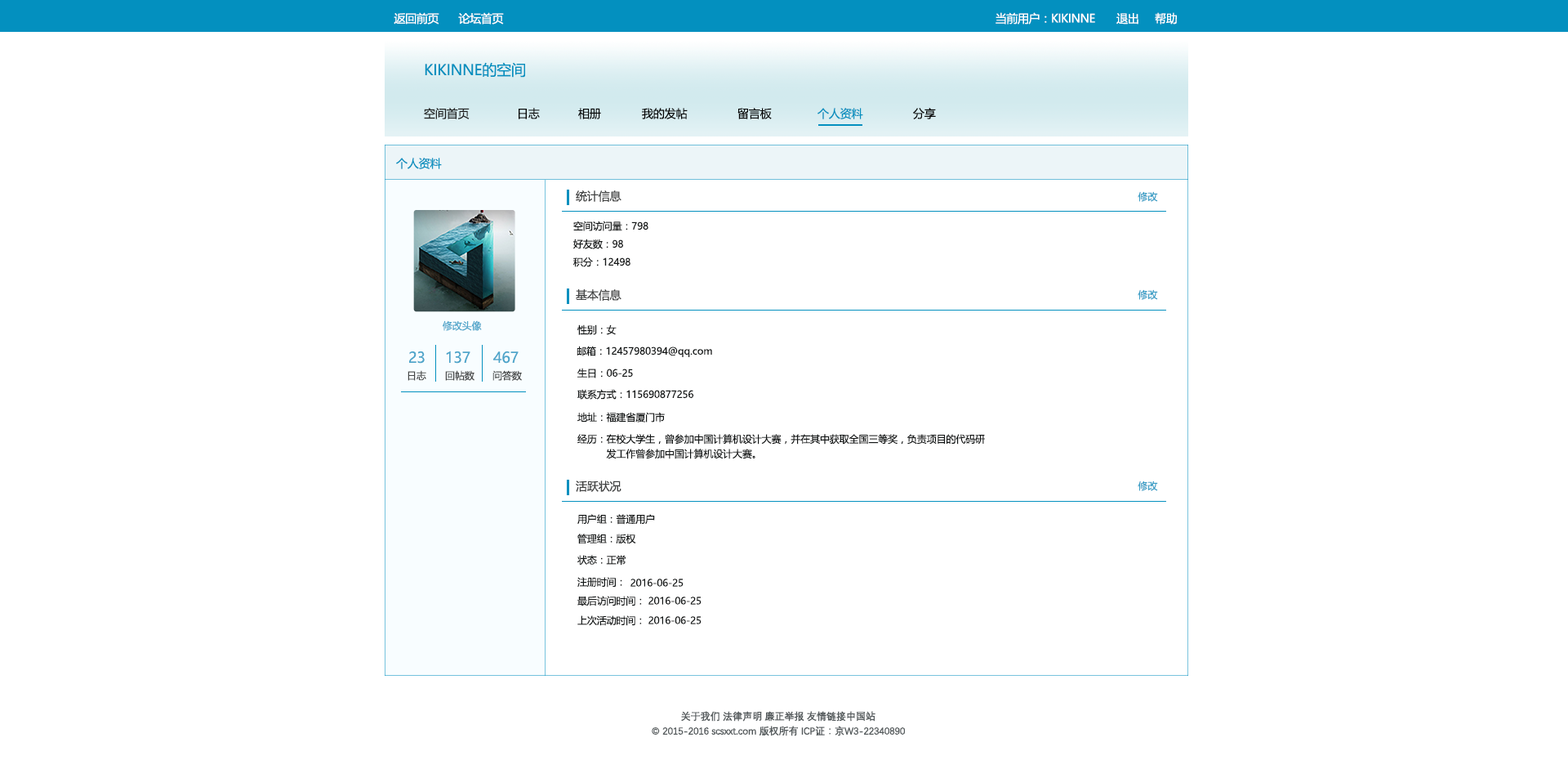
<style>
.page{position:relative;width:1568px;height:760px;background:#ffffff}
.page>*{position:absolute;margin:0}
.t1{font:11.4px "MicrosoftYaHei";letter-spacing:-0.025em;color:#ffffff}
.t2{font:14.7px "MicrosoftYaHei";letter-spacing:-0.01em;color:#0390bf}
.t3{font:11.4px "MicrosoftYaHei";letter-spacing:-0.01em;color:#212222}
.t4{font:11.4px "MicrosoftYaHei";letter-spacing:-0.01em;color:#040404}
.t5{font:11.4px "MicrosoftYaHei";letter-spacing:-0.01em;color:#0390bf}
.t6{font:11.4px "MicrosoftYaHei";letter-spacing:-0.01em;color:#404141}
.t7{font:9.8px "MicrosoftYaHei";letter-spacing:-0.01em;color:#3a9ec6}
.t8{font:9.8px "MicrosoftYaHei";letter-spacing:-0.01em;color:#131616}
.t9{font:9.8px "MicrosoftYaHei";letter-spacing:-0.01em;color:#4ea5ca}
.t10{font:14.7px "MicrosoftYaHei";letter-spacing:-0.01em;color:#4ea5ca}
.t11{font:9.8px "MicrosoftYaHei";letter-spacing:-0.01em;color:#454646}
.t12{font:9.8px/14.7px "MicrosoftYaHei";letter-spacing:-0.01em;color:#131616}
.t13{font:9.8px/14.7px "DengXian-Regular";letter-spacing:-0.025em;color:#545a5c;font-weight:bold}
</style>
<div class="page">
<p class="t1" style="left:394px;top:12px;width:45px;height:12px">返回前页</p>
<p class="t1" style="left:458px;top:12px;width:46px;height:12px">论坛首页</p>
<p class="t1" style="left:996px;top:12px;width:99px;height:12px">当前用户：KIKINNE</p>
<p class="t1" style="left:1116px;top:13px;width:22px;height:11px">退出</p>
<p class="t1" style="left:1155px;top:12px;width:22px;height:12px">帮助</p>
<p class="t2" style="left:425px;top:62px;width:100px;height:16px">KIKINNE的空间</p>
<p class="t3" style="left:424px;top:108px;width:46px;height:11px">空间首页</p>
<p class="t4" style="left:519px;top:108px;width:21px;height:11px">日志</p>
<p class="t4" style="left:578px;top:108px;width:23px;height:11px">相册</p>
<p class="t4" style="left:642px;top:108px;width:46px;height:11px">我的发帖</p>
<p class="t4" style="left:737px;top:108px;width:35px;height:11px">留言板</p>
<p class="t5" style="left:817px;top:108px;width:46px;height:11px">个人资料</p>
<p class="t4" style="left:913px;top:108px;width:23px;height:11px">分享</p>
<p class="t5" style="left:396px;top:158px;width:46px;height:11px">个人资料</p>
<p class="t6" style="left:576px;top:190px;width:45px;height:12px">统计信息</p>
<p class="t7" style="left:1138px;top:191px;width:20px;height:11px">修改</p>
<p class="t8" style="left:573px;top:220px;width:75px;height:11px">空间访问量：798</p>
<p class="t8" style="left:573px;top:238px;width:50px;height:11px">好友数：98</p>
<p class="t8" style="left:573px;top:256px;width:57px;height:11px">积分：12498</p>
<p class="t6" style="left:576px;top:289px;width:45px;height:12px">基本信息</p>
<p class="t7" style="left:1138px;top:289px;width:20px;height:11px">修改</p>
<p class="t9" style="left:443px;top:320px;width:39px;height:11px">修改头像</p>
<p class="t8" style="left:577px;top:324px;width:40px;height:11px">性别：女</p>
<p class="t10" style="left:409px;top:351px;width:16px;height:12px">23</p>
<p class="t10" style="left:446px;top:350px;width:24px;height:13px">137</p>
<p class="t10" style="left:493px;top:351px;width:26px;height:12px">467</p>
<p class="t8" style="left:577px;top:345px;width:135px;height:12px">邮箱：12457980394@qq.com</p>
<p class="t11" style="left:408px;top:370px;width:18px;height:11px">日志</p>
<p class="t11" style="left:445px;top:370px;width:29px;height:11px">回帖数</p>
<p class="t11" style="left:492px;top:370px;width:30px;height:11px">问答数</p>
<p class="t8" style="left:577px;top:368px;width:56px;height:10px">生日：06-25</p>
<p class="t8" style="left:577px;top:389px;width:117px;height:10px">联系方式：115690877256</p>
<p class="t8" style="left:577px;top:412px;width:88px;height:10px">地址：福建省厦门市</p>
<p class="t12" style="left:577px;top:434px;width:408px;height:25px">经历：在校大学生，曾参加中国计算机设计大赛，并在其中获取全国三等奖，负责项目的代码研　　　发工作曾参加中国计算机设计大赛。</p>
<p class="t6" style="left:576px;top:480px;width:45px;height:12px">活跃状况</p>
<p class="t7" style="left:1138px;top:480px;width:20px;height:11px">修改</p>
<p class="t8" style="left:577px;top:514px;width:78px;height:10px">用户组：普通用户</p>
<p class="t8" style="left:577px;top:533px;width:59px;height:11px">管理组：版权</p>
<p class="t8" style="left:577px;top:555px;width:49px;height:10px">状态：正常</p>
<p class="t8" style="left:577px;top:577px;width:45px;height:10px">注册时间：</p>
<p class="t8" style="left:630px;top:578px;width:54px;height:8px">2016-06-25</p>
<p class="t8" style="left:577px;top:595px;width:65px;height:11px">最后访问时间：</p>
<p class="t8" style="left:648px;top:596px;width:54px;height:8px">2016-06-25</p>
<p class="t8" style="left:577px;top:615px;width:65px;height:11px">上次活动时间：</p>
<p class="t8" style="left:648px;top:616px;width:54px;height:8px">2016-06-25</p>
<p class="t13" style="left:652px;top:710px;width:253px;height:26px;text-align:center">关于我们 法律声明 廉正举报 友情链接中国站<br>© 2015-2016 scsxxt.com 版权所有 ICP证：京W3-22340890</p>
</div>
